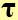
<style>
.page{position:relative;width:18px;height:20px;background:#fcfcaa}
.page>*{position:absolute;margin:0}
.t1{font:32px "TimesNewRomanPS-BoldMT";color:#000001;scale:0.96 1}
</style>
<div class="page">
<p class="t1" style="left:1px;top:3px;width:15px;height:14px">τ</p>
</div>
